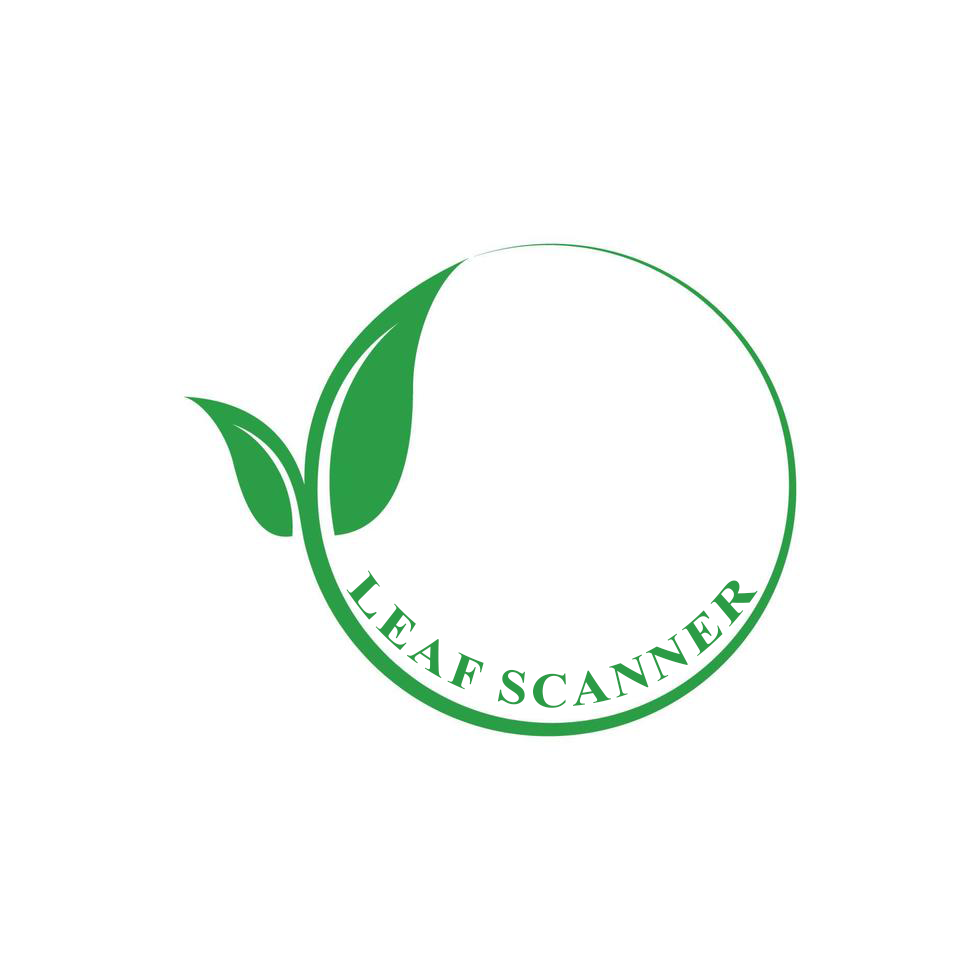
<style>
.page{position:relative;width:980px;height:980px;background:#ffffff}
.page>*{position:absolute;margin:0}
.t1{font:48px "TimesNewRomanPS-BoldMT";letter-spacing:0.075em;color:#2c9c46;scale:0.87 1}
</style>
<div class="page">
<p class="t1" style="left:346px;top:570px;width:412px;height:138px">LEAF SCANNER</p>
</div>
